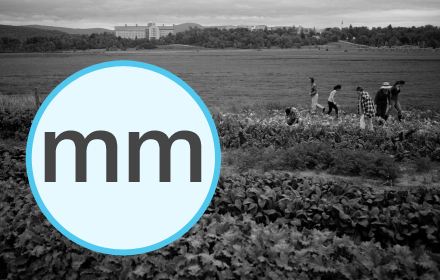
<style>
.page{position:relative;width:440px;height:280px}
.page>*{position:absolute;margin:0}
.t1{font:96.7px "HelveticaNeue-Medium";color:#454545}
</style>
<div class="page">
<p class="t1" style="left:44px;top:130px;width:158px;height:52px">mm</p>
</div>
